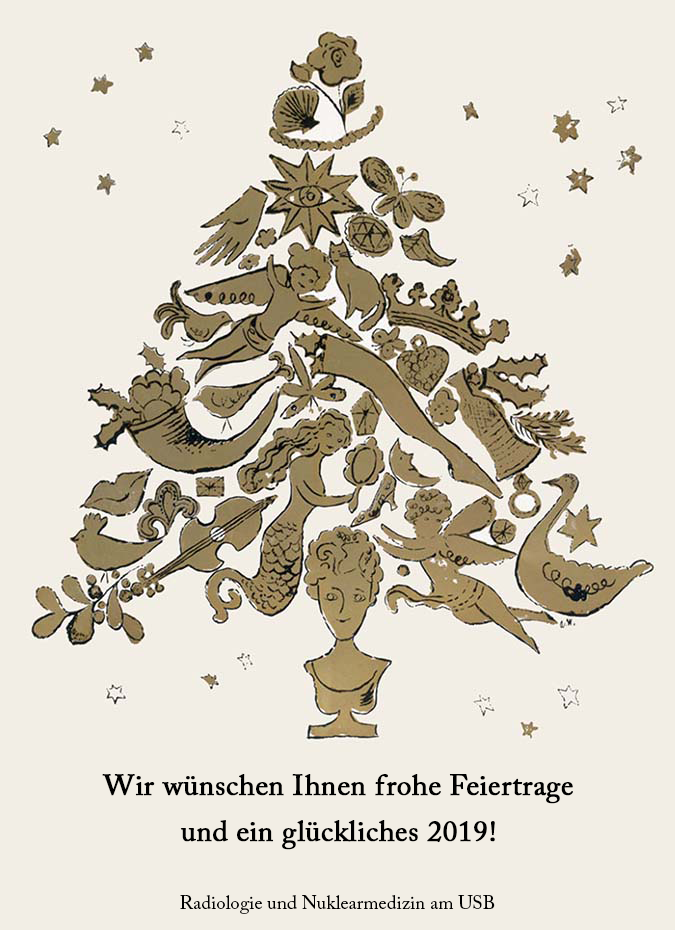
<style>
.page{position:relative;width:675px;height:930px;background:#f2eee5}
.page>*{position:absolute;margin:0}
.t1{font:29px/46px "ACaslonPro-Regular";color:#000000;font-weight:bold}
.t2{font:19px "ACaslonPro-Regular";color:#000000}
</style>
<div class="page">
<p class="t1" style="left:102px;top:774px;width:471px;height:76px;text-align:center">Wir wünschen Ihnen frohe Feiertrage<br>und ein glückliches 2019!</p>
<p class="t2" style="left:180px;top:895px;width:315px;height:19px">Radiologie und Nuklearmedizin am USB</p>
</div>
